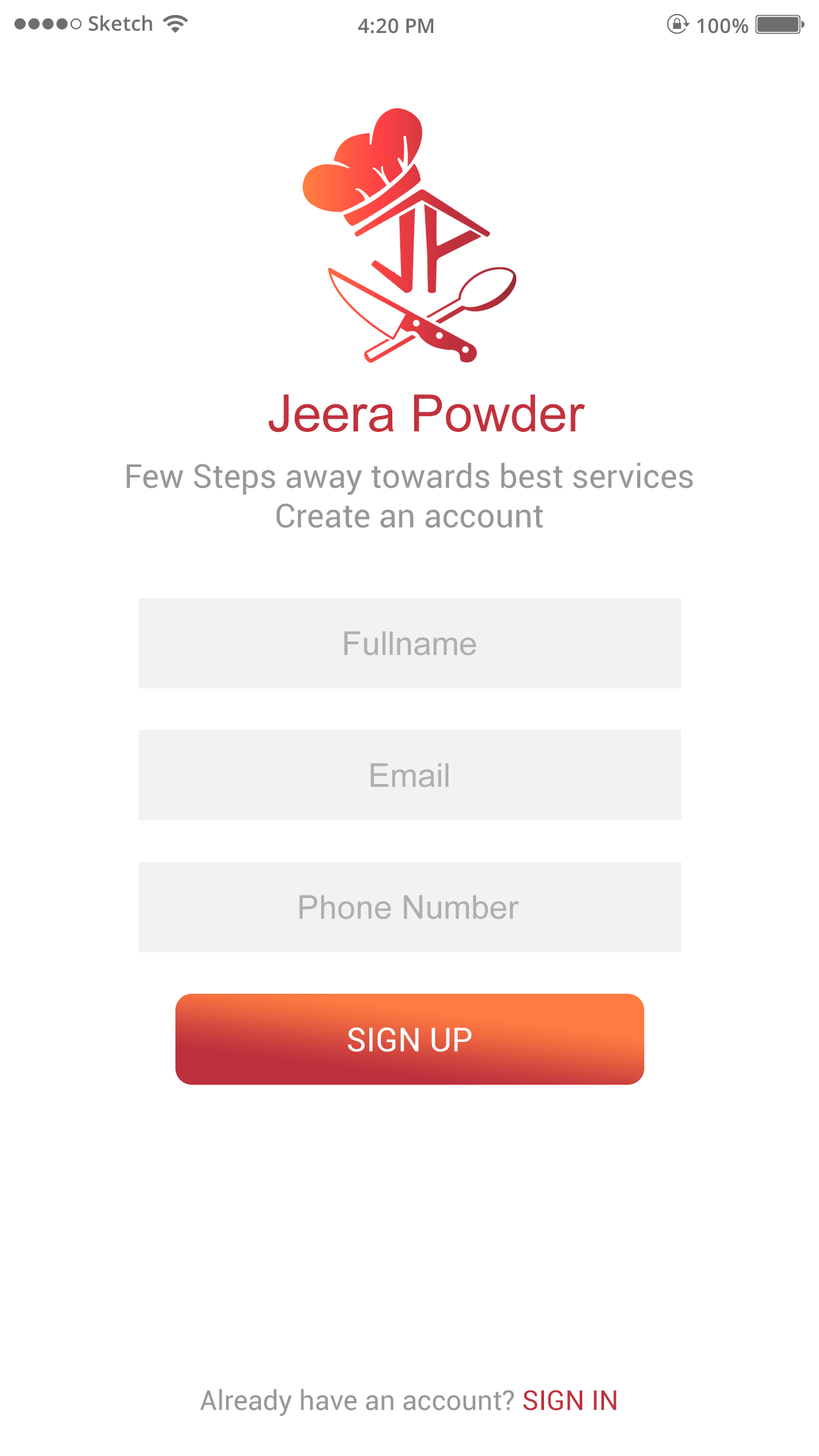
<style>
.page{position:relative;width:819px;height:1456px;background:#ffffff}
.page>*{position:absolute;margin:0}
.t1{font:20.1px "OpenSans-Semibold";color:#6e6e6e}
.t2{font:51.5px "ArialMT";color:#c2313d}
.t3{font:33px "Roboto-Regular";color:#969799}
.t4{font:33px "ArialMT";color:#aeafb1}
.t5{font:33px "Roboto-Regular";color:#ffffff}
.t6{font:27.5px "Roboto-Regular";color:#969799}
.t7{font:27.5px "Roboto-Regular";color:#bf303d}
</style>
<div class="page">
<p class="t1" style="left:88px;top:15px;width:64px;height:16px">Sketch</p>
<p class="t1" style="left:358px;top:18px;width:75px;height:16px">4:20 PM</p>
<p class="t1" style="left:697px;top:18px;width:51px;height:16px">100%</p>
<p class="t2" style="left:268px;top:394px;width:318px;height:39px">Jeera Powder</p>
<p class="t3" style="left:127px;top:462px;width:566px;height:66px;text-align:center">Few Steps away towards best services<br>Create an account</p>
<p class="t4" style="left:344px;top:631px;width:132px;height:24px">Fullname</p>
<p class="t4" style="left:371px;top:763px;width:77px;height:24px">Email</p>
<p class="t4" style="left:299px;top:895px;width:220px;height:24px">Phone Number</p>
<p class="t5" style="left:348px;top:1027px;width:123px;height:25px">SIGN UP</p>
<p class="t6" style="left:200px;top:1389px;width:417px;height:27px">Already have an account? <span class="t7">SIGN IN</span></p>
</div>
